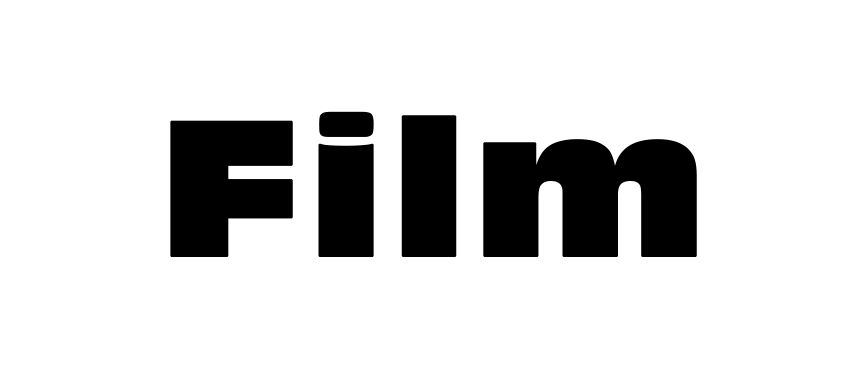
<style>
.page{position:relative;width:862px;height:370px;background:#ffffff}
.page>*{position:absolute;margin:0}
.t1{font:187.7px "AntiqueOlive-Compact";color:#000000;font-weight:bold;scale:1.08 1}
</style>
<div class="page">
<p class="t1" style="left:170px;top:111px;width:527px;height:146px">Film</p>
</div>
